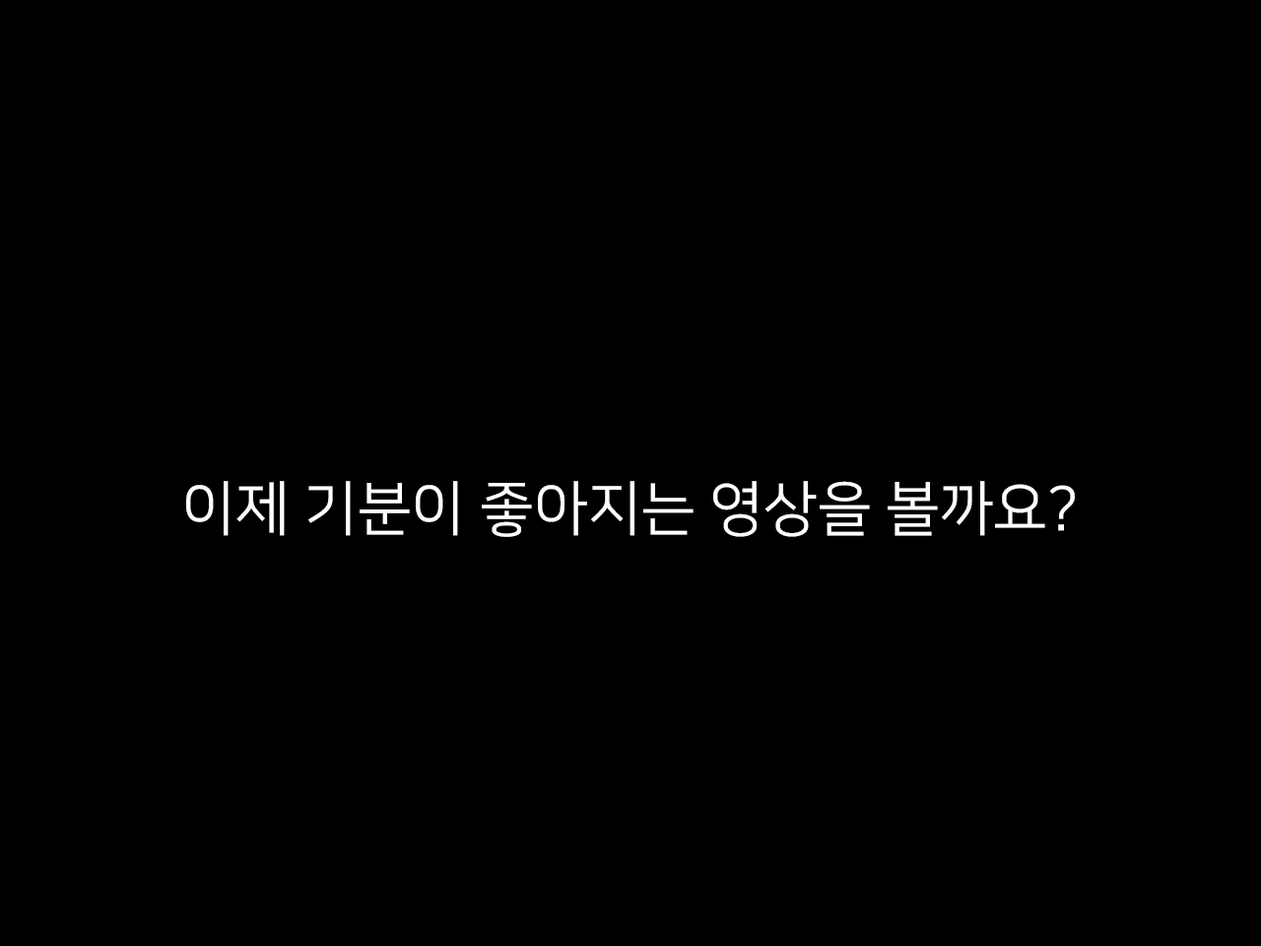
<style>
.page{position:relative;width:1261px;height:946px;background:#000000}
.page>*{position:absolute;margin:0}
.t1{font:59.1px "NanumSquareR";color:#ffffff}
</style>
<div class="page">
<p class="t1" style="left:186px;top:481px;width:889px;height:56px">이제 기분이 좋아지는 영상을 볼까요?</p>
</div>
